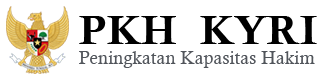
<style>
.page{position:relative;width:331px;height:83px;background:#ffffff}
.page>*{position:absolute;margin:0}
.t1{font:39.7px "CalisMTBol";color:#000000;scale:1.12 1}
.t2{font:18.5px "CalistoMT";color:#51555b}
</style>
<div class="page">
<p class="t1" style="left:79px;top:16px;width:238px;height:28px">PKH  KYRI</p>
<p class="t2" style="left:79px;top:51px;width:236px;height:17px">Peningkatan Kapasitas Hakim</p>
</div>
